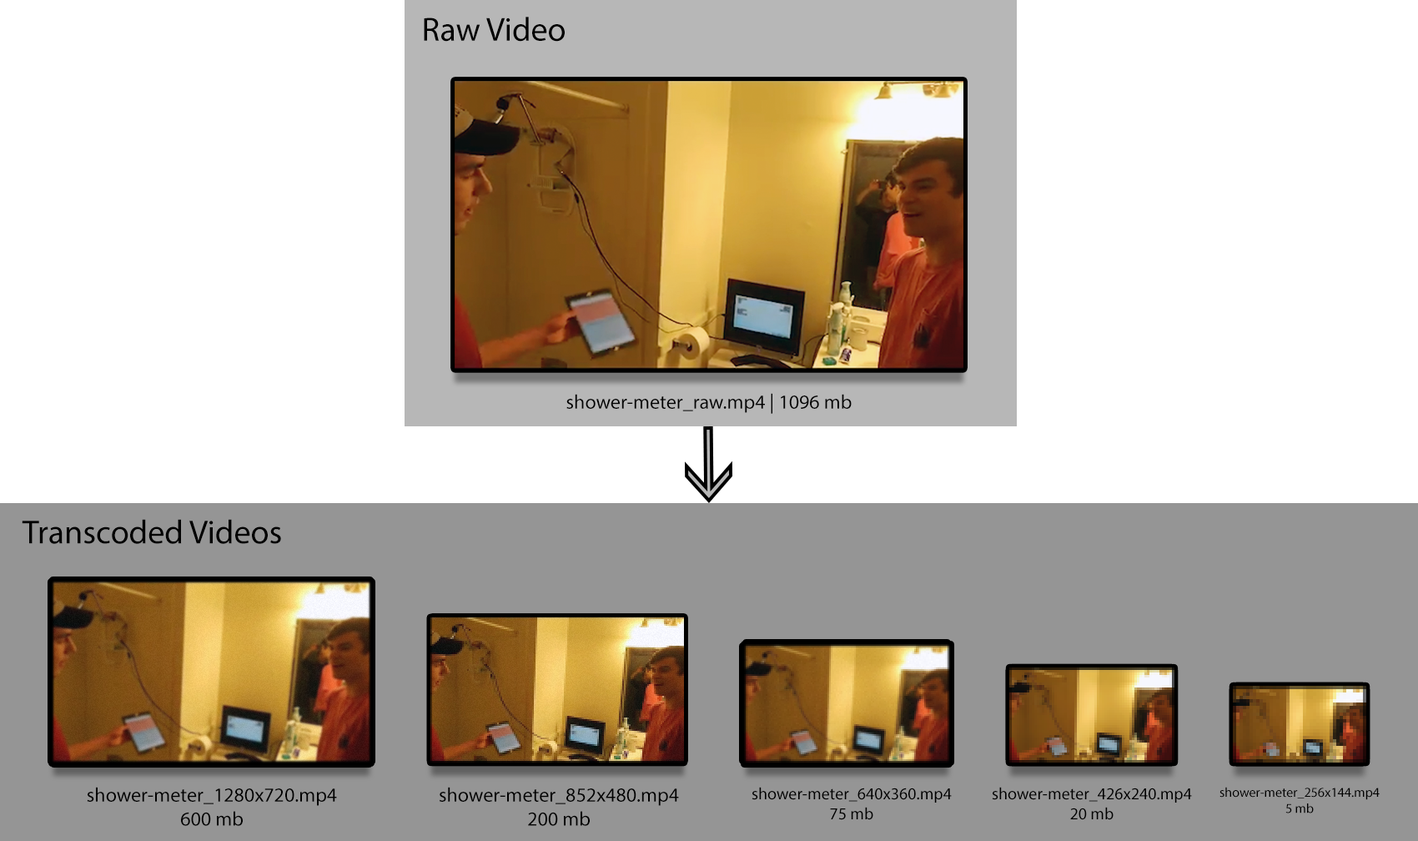
<style>
.page{position:relative;width:1418px;height:841px;background:#ffffff}
.page>*{position:absolute;margin:0}
.t1{font:33.4px "MyriadPro-Regular";color:#000000}
.t2{font:20px "MyriadPro-Regular";color:#000000}
.t3{font:16.7px "MyriadPro-Regular";color:#000000}
.t4{font:13.3px "MyriadPro-Regular";color:#000000}
</style>
<div class="page">
<p class="t1" style="left:424px;top:17px;width:141px;height:25px">Raw Video</p>
<p class="t2" style="left:566px;top:393px;width:286px;height:21px">shower-meter_raw.mp4 | 1096 mb</p>
<p class="t1" style="left:22px;top:519px;width:259px;height:25px"><span class="t2">  </span>Transcoded Videos</p>
<p class="t2" style="left:87px;top:787px;width:250px;height:39px;text-align:center">shower-meter_1280x720.mp4<br>600 mb</p>
<p class="t2" style="left:440px;top:787px;width:239px;height:39px;text-align:center">shower-meter_852x480.mp4<br>200 mb</p>
<p class="t3" style="left:752px;top:787px;width:200px;height:33px;text-align:center">shower-meter_640x360.mp4<br>75 mb</p>
<p class="t3" style="left:992px;top:787px;width:200px;height:33px;text-align:center">shower-meter_426x240.mp4<br>20 mb</p>
<p class="t4" style="left:1220px;top:787px;width:160px;height:26px;text-align:center">shower-meter_256x144.mp4<br>5 mb</p>
</div>
